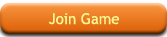
<style>
.page{position:relative;width:167px;height:37px}
.page>*{position:absolute;margin:0}
.t1{font:15px "TrebuchetMS";color:#f9f592}
</style>
<div class="page">
<p class="t1" style="left:48px;top:13px;width:71px;height:12px">Join Game</p>
</div>
